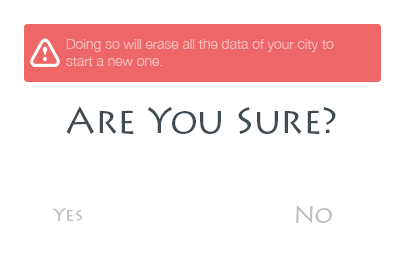
<style>
.page{position:relative;width:400px;height:267px;background:#ffffff}
.page>*{position:absolute;margin:0}
.t1{font:14px "HelveticaNeue-Light";color:#f7bdbd}
.t2{font:36px "LithosPro-Regular";color:#414b52}
.t3{font:18px "LithosPro-Regular";color:#bebebf}
.t4{font:24px "LithosPro-Regular";color:#bebebf}
</style>
<div class="page">
<p class="t1" style="left:66px;top:39px;width:268px;height:27px">Doing so will erase all the data of your city to <br> start a new one.</p>
<p class="t2" style="left:66px;top:106px;width:270px;height:28px">Are You Sure?</p>
<p class="t3" style="left:53px;top:208px;width:29px;height:13px">Yes</p>
<p class="t4" style="left:296px;top:205px;width:36px;height:18px">No</p>
</div>
